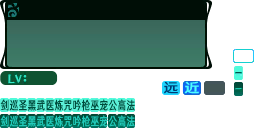
<style>
.page{position:relative;width:256px;height:128px;background:#ffffff}
.page>*{position:absolute;margin:0}
.t1{font:13.3px "HYWenHei-FEW";letter-spacing:0.425em;color:#003b74;scale:1.1 1}
.t2{font:13.3px "HYWenHei-FEW";letter-spacing:0.425em;color:#4cffff;scale:1.1 1}
.t3{font:12px "HYWenHei-FEW";letter-spacing:0.07em;color:#004c3c;scale:0.7 1}
.t4{font:12px "HYWenHei-FEW";letter-spacing:0.07em;color:#21cbba;scale:0.7 1}
</style>
<div class="page">
<p class="t1" style="left:164px;top:81px;width:35px;height:13px">远<span class="t2">近</span></p>
<p class="t3" style="left:0px;top:99px;width:135px;height:12px">剑巡圣黑武医炼咒吟枪巫宠公高法</p>
<p class="t4" style="left:0px;top:115px;width:135px;height:12px">剑巡圣黑武医炼咒吟枪巫宠公高法</p>
</div>
